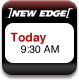
<style>
.page{position:relative;width:79px;height:80px;background:#ffffff}
.page>*{position:absolute;margin:0}
.t1{font:10.4px/11.3px "Helvetica";color:#000000}
.t2{font:12.1px/11.3px "Helvetica-Bold";color:#b41010}
</style>
<div class="page">
<p class="t1" style="left:10px;top:32px;width:49px;height:21px"><span class="t2">Today<br>   </span>9:30 AM</p>
</div>
